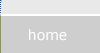
<style>
.page{position:relative;width:100px;height:53px;background:#cecece}
.page>*{position:absolute;margin:0}
.t1{font:14px "Verdana";color:#ffffff}
</style>
<div class="page">
<p class="t1" style="left:29px;top:29px;width:38px;height:12px">home</p>
</div>
